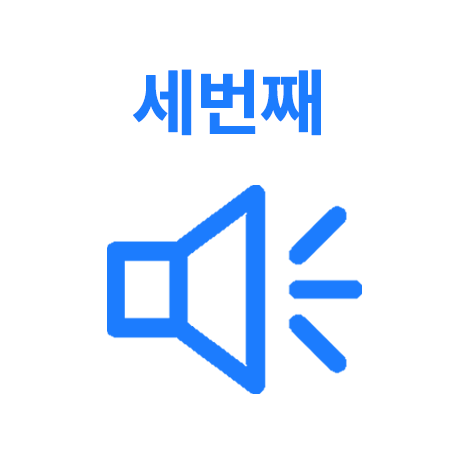
<style>
.page{position:relative;width:465px;height:465px;background:#ffffff}
.page>*{position:absolute;margin:0}
.t1{font:73.2px "Pretendard-Bold";color:#1c7cfe;font-weight:bold}
</style>
<div class="page">
<p class="t1" style="left:133px;top:69px;width:188px;height:67px">세번째</p>
</div>
